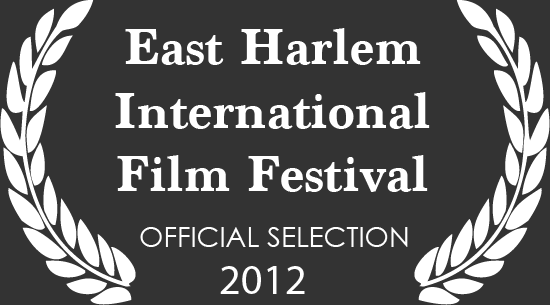
<style>
.page{position:relative;width:550px;height:305px;background:#333333}
.page>*{position:absolute;margin:0}
.t1{font:52.9px "Marion-Bold";color:#ffffff}
.t2{font:27.9px "CenturyGothic";color:#ffffff}
.t3{font:42.5px "MyriadPro-Regular";color:#ffffff}
</style>
<div class="page">
<p class="t1" style="left:115px;top:28px;width:315px;height:164px;text-align:center">East Harlem<br>International<br>Film Festival</p>
<p class="t2" style="left:140px;top:227px;width:268px;height:20px">OFFICIAL SELECTION</p>
<p class="t3" style="left:220px;top:266px;width:85px;height:28px">2012</p>
</div>
